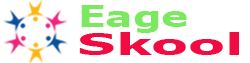
<style>
.page{position:relative;width:250px;height:63px;background:#ffffff}
.page>*{position:absolute;margin:0}
.t1{font:30px "Verdana-Bold";color:#7be95f;scale:1.36 1}
.t2{font:30px "Verdana-Bold";color:#f10b41;scale:1.78 1}
</style>
<div class="page">
<p class="t1" style="left:81px;top:5px;width:106px;height:28px">Eage</p>
<p class="t2" style="left:79px;top:32px;width:160px;height:23px">Skool</p>
</div>
